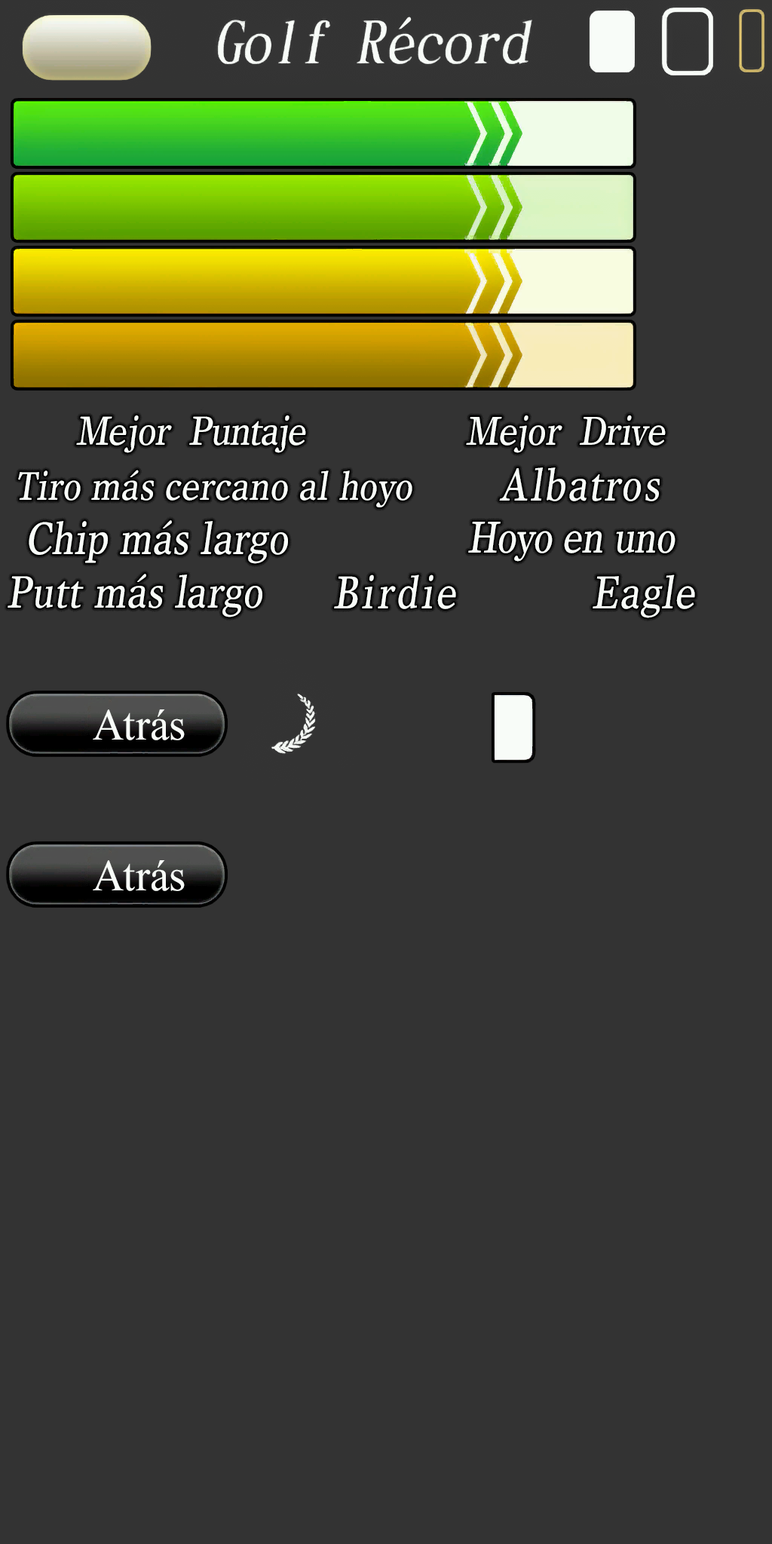
<style>
.page{position:relative;width:772px;height:1544px;background:#333333}
.page>*{position:absolute;margin:0}
.t1{font:40.6px "TimesEuropaLTStd-Roman";letter-spacing:-0.02em;color:#f8fcf8;font-style:italic;scale:0.83 1}
.t2{font:40.6px "TimesEuropaLTStd-Roman";color:#f8fcf8;font-style:italic;scale:0.83 1}
.t3{font:40.4px "TimesEuropaLTStd-Roman";color:#f8fcf8;font-style:italic;scale:0.84 1}
.t4{font:39.9px "TimesEuropaLTStd-Roman";letter-spacing:0.02em;color:#f8fcf8;font-style:italic;scale:0.83 1}
.t5{font:45.4px "TimesEuropaLTStd-Roman";letter-spacing:0.06em;color:#f8fcf8;font-style:italic;scale:0.81 1}
.t6{font:45.4px "TimesEuropaLTStd-Roman";letter-spacing:0.02em;color:#f8fcf8;font-style:italic;scale:0.81 1}
.t7{font:44.7px "TimesEuropaLTStd-Roman";color:#f8fcf8;font-style:italic;scale:0.8 1}
.t8{font:46.1px "TimesEuropaLTStd-Roman";letter-spacing:0.1em;color:#f8fcf8;font-style:italic;scale:0.8 1}
.t9{font:46.1px "TimesEuropaLTStd-Roman";letter-spacing:0.04em;color:#f8fcf8;font-style:italic;scale:0.8 1}
.t10{font:44.5px "TimesNewRomanPSMT";color:#f8fcf8}
</style>
<div class="page">
<p class="t1" style="left:76px;top:415px;width:230px;height:38px"><span class="t2">Mejor  </span>Puntaje</p>
<p class="t3" style="left:466px;top:415px;width:200px;height:38px">Mejor  Drive</p>
<p class="t4" style="left:18px;top:470px;width:394px;height:37px">Tiro más cercano al hoyo</p>
<p class="t5" style="left:499px;top:468px;width:161px;height:33px">Albatros</p>
<p class="t6" style="left:29px;top:520px;width:259px;height:44px">Chip más largo</p>
<p class="t7" style="left:468px;top:522px;width:208px;height:40px">Hoyo en uno</p>
<p class="t6" style="left:8px;top:574px;width:254px;height:44px">Putt más largo</p>
<p class="t8" style="left:334px;top:575px;width:122px;height:34px">Birdie</p>
<p class="t9" style="left:593px;top:575px;width:102px;height:43px">Eagle</p>
<p class="t10" style="left:93px;top:710px;width:92px;height:30px">Atrás</p>
</div>
